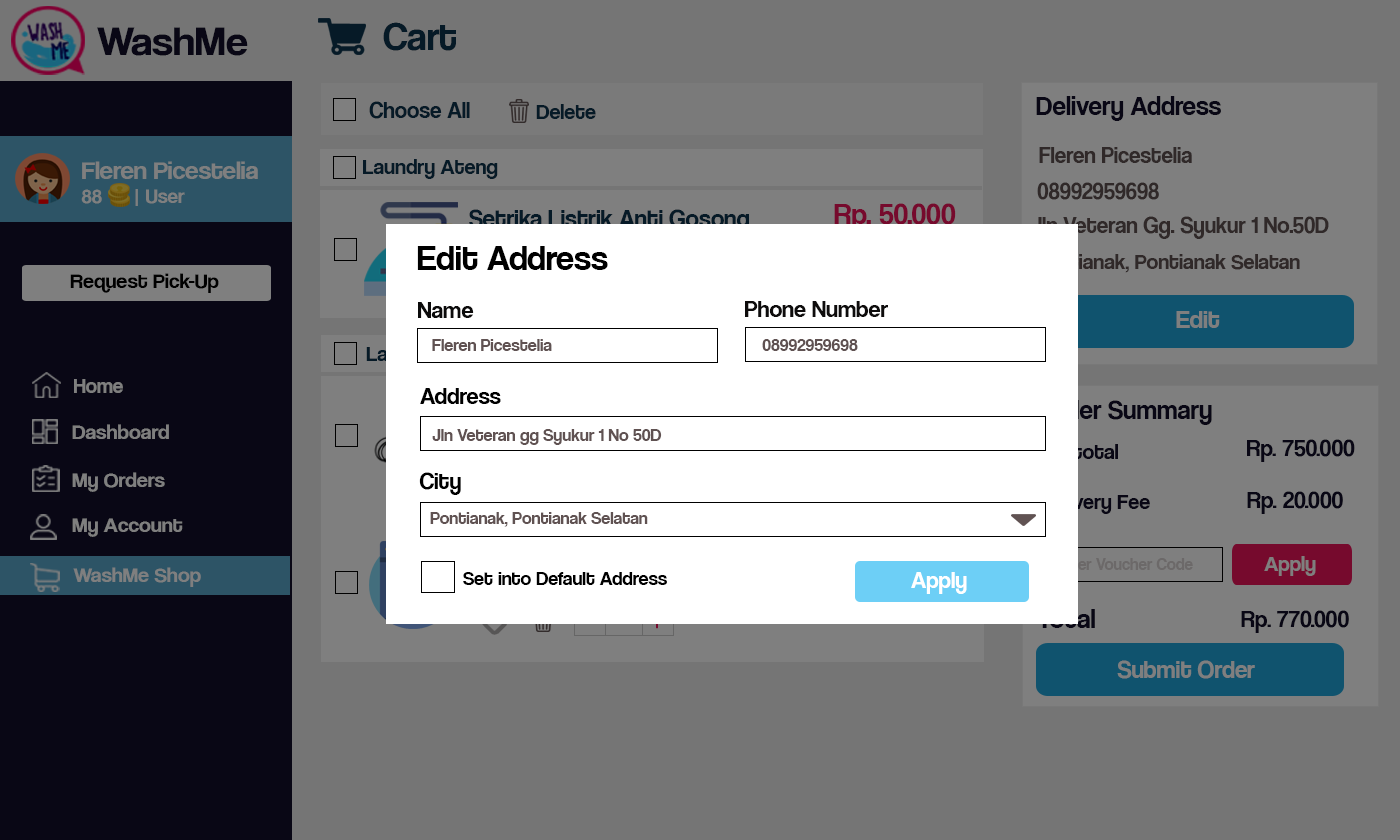
<style>
.page{position:relative;width:1400px;height:840px;background:#757575}
.page>*{position:absolute;margin:0}
.t1{font:42.1px "CoolveticaRg-Regular";color:#120f2b;scale:1.05 1}
.t2{font:40.4px "CoolveticaRg-Regular";color:#061a27}
.t3{font:23px "CoolveticaRg-Regular";color:#061a27}
.t4{font:27px "CoolveticaRg-Regular";color:#120f2b}
.t5{font:22px "CoolveticaRg-Regular";color:#061a27}
.t6{font:23px "CoolveticaRg-Regular";color:#302929}
.t7{font:25.2px "CoolveticaRg-Regular";color:#7f7f7f;scale:1.05 1}
.t8{font:20px "CoolveticaRg-Regular";color:#7f7f7f;scale:1.05 1}
.t9{font:25px "CoolveticaRg-Regular";color:#061a27}
.t10{font:30.2px "CoolveticaRg-Regular";color:#760a2d}
.t11{font:36px "CoolveticaRg-Regular";color:#000000}
.t12{font:22px "CoolveticaRg-Regular";color:#302929}
.t13{font:21px "CoolveticaRg-Regular";color:#000000;scale:1.05 1}
.t14{font:24px "CoolveticaRg-Regular";color:#0c0b0b}
.t15{font:24px "CoolveticaRg-Regular";color:#0e0c0c}
.t16{font:26px "CoolveticaRg-Regular";color:#7f7f7f}
.t17{font:18px "CoolveticaRg-Regular";color:#605252}
.t18{font:21px "CoolveticaRg-Regular";color:#7f7f7f}
.t19{font:24px "CoolveticaRg-Regular";color:#000000}
.t20{font:21px "CoolveticaRg-Regular";color:#7f7f7f;scale:1.05 1}
.t21{font:24px "CoolveticaRg-Regular";color:#120f2b}
.t22{font:30px "CoolveticaRg-Regular";color:#ffffff}
.t23{font:22px "CoolveticaRg-Regular";color:#7f7f7f}
.t24{font:20px "CoolveticaRg-Regular";color:#000000}
.t25{font:24.4px "CoolveticaRg-Regular";color:#ffffff}
.t26{font:28px "CoolveticaRg-Regular"}
.t27{font:25px "CoolveticaRg-Regular";color:#7f7f7f}
</style>
<div class="page">
<p class="t1" style="left:97px;top:27px;width:151px;height:29px">WashMe</p>
<p class="t2" style="left:383px;top:22px;width:73px;height:29px">Cart</p>
<p class="t3" style="left:369px;top:101px;width:101px;height:18px">Choose All</p>
<p class="t4" style="left:1036px;top:96px;width:185px;height:25px">Delivery Address</p>
<p class="t5" style="left:536px;top:104px;width:60px;height:15px">Delete</p>
<p class="t6" style="left:1039px;top:147px;width:153px;height:16px">Fleren Picestelia</p>
<p class="t7" style="left:81px;top:161px;width:177px;height:45px">Fleren Picestelia<br><span class="t8">88      | User</span></p>
<p class="t5" style="left:363px;top:159px;width:135px;height:20px">Laundry Ateng</p>
<p class="t6" style="left:1037px;top:182px;width:122px;height:18px">08992959698</p>
<p class="t9" style="left:469px;top:209px;width:280px;height:24px">Setrika Listrik Anti Gosong</p>
<p class="t10" style="left:834px;top:203px;width:122px;height:28px">Rp. 50.000</p>
<p class="t6" style="left:1031px;top:216px;width:298px;height:23px">Jln Veteran Gg. Syukur 1 No.50D</p>
<p class="t11" style="left:417px;top:246px;width:191px;height:24px">Edit Address</p>
<p class="t12" style="left:1034px;top:254px;width:266px;height:19px">Pontianak, Pontianak Selatan</p>
<p class="t13" style="left:70px;top:273px;width:149px;height:20px">Request Pick-Up</p>
<p class="t14" style="left:418px;top:302px;width:56px;height:16px">Name</p>
<p class="t15" style="left:745px;top:301px;width:143px;height:16px">Phone Number</p>
<p class="t16" style="left:1176px;top:311px;width:44px;height:17px">Edit</p>
<p class="t17" style="left:432px;top:339px;width:120px;height:12px">Fleren Picestelia</p>
<p class="t17" style="left:762px;top:339px;width:96px;height:12px">08992959698</p>
<p class="t18" style="left:74px;top:379px;width:49px;height:14px">Home</p>
<p class="t19" style="left:420px;top:388px;width:81px;height:16px">Address</p>
<p class="t4" style="left:1039px;top:400px;width:173px;height:25px">Order Summary</p>
<p class="t20" style="left:72px;top:424px;width:97px;height:15px">Dashboard</p>
<p class="t17" style="left:432px;top:429px;width:230px;height:16px">Jln Veteran gg Syukur 1 No 50D</p>
<p class="t21" style="left:1247px;top:439px;width:108px;height:23px">Rp. 750.000</p>
<p class="t20" style="left:72px;top:472px;width:93px;height:20px">My Orders</p>
<p class="t19" style="left:419px;top:472px;width:42px;height:23px">City</p>
<p class="t21" style="left:1247px;top:491px;width:96px;height:23px">Rp. 20.000</p>
<p class="t20" style="left:72px;top:518px;width:111px;height:19px">My Account</p>
<p class="t17" style="left:430px;top:512px;width:218px;height:15px">Pontianak, Pontianak Selatan</p>
<p class="t22" style="left:834px;top:541px;width:136px;height:28px">Rp. 500.000</p>
<p class="t23" style="left:1264px;top:556px;width:52px;height:20px">Apply</p>
<p class="t20" style="left:73px;top:567px;width:128px;height:20px">WashMe Shop</p>
<p class="t24" style="left:463px;top:572px;width:204px;height:13px">Set into Default Address</p>
<p class="t25" style="left:911px;top:572px;width:56px;height:22px">Apply</p>
<p class="t26" style="left:1037px;top:609px;width:58px;height:19px">Total</p>
<p class="t21" style="left:1241px;top:610px;width:108px;height:23px">Rp. 770.000</p>
<p class="t27" style="left:1117px;top:660px;width:138px;height:19px">Submit Order</p>
</div>
